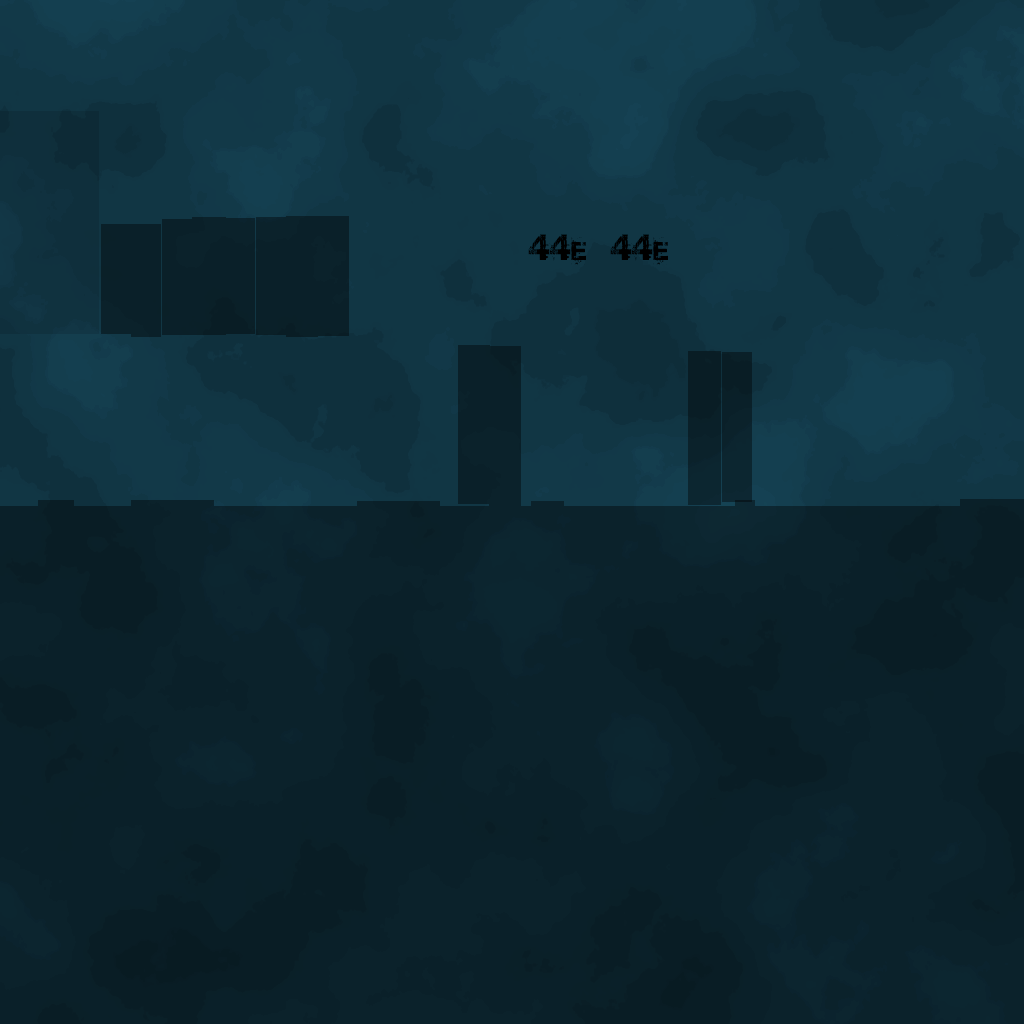
<style>
.page{position:relative;width:1024px;height:1024px}
.page>*{position:absolute;margin:0}
.t1{font:32.4px "Base02";color:#000000;font-variant:small-caps}
.t2{font:32.4px "Base02";color:#010101;font-variant:small-caps}
</style>
<div class="page">
<p class="t1" style="left:528px;top:234px;width:58px;height:31px">44e</p>
<p class="t2" style="left:610px;top:234px;width:58px;height:31px">44e</p>
</div>
